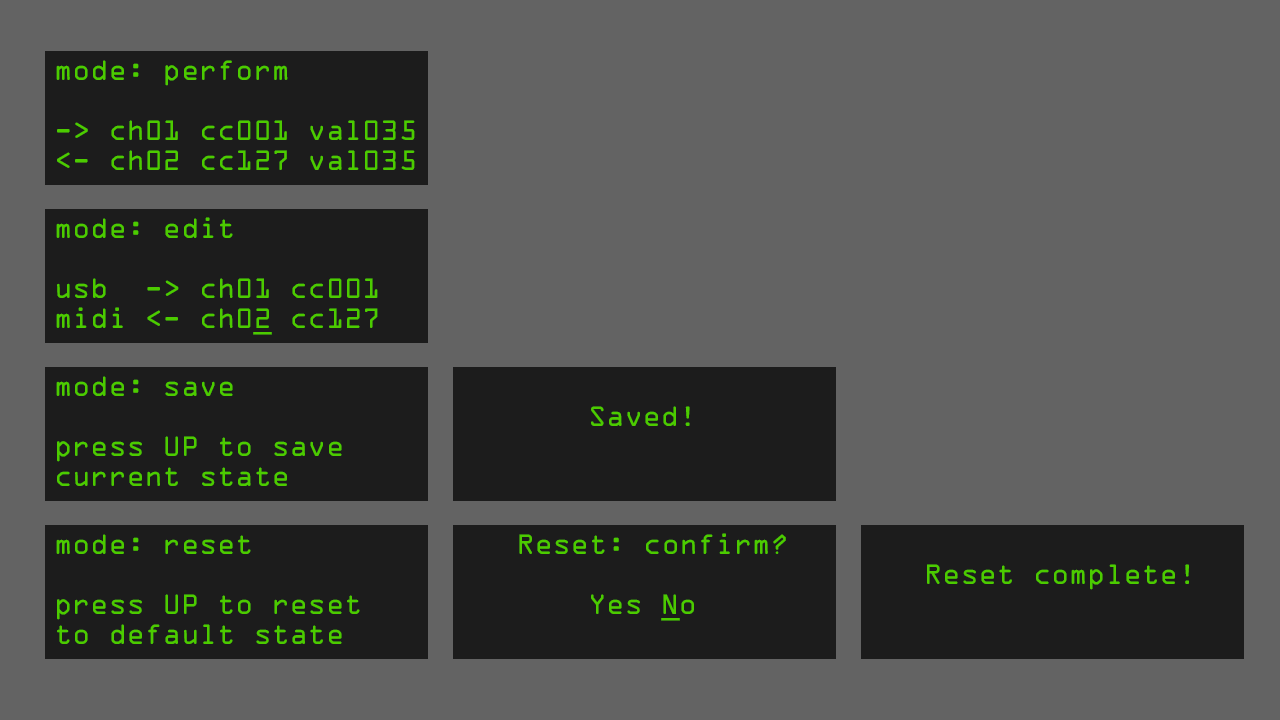
<style>
.page{position:relative;width:1280px;height:720px;background:#636363}
.page>*{position:absolute;margin:0}
.t1{font:30px/30px "OCR-A";color:#4ccb00}
.t2{font:30px "OCR-A";color:#4ccb00}
</style>
<div class="page">
<p class="t1" style="left:56px;top:60px;width:359px;height:110px">mode: perform<br><br>-&gt; ch01 cc001 val035<br>&lt;- ch02 cc127 val035</p>
<p class="t1" style="left:56px;top:217px;width:322px;height:111px">mode: edit<br><br>usb  -&gt; ch01 cc001<br>midi &lt;- ch02 cc127</p>
<p class="t2" style="left:253px;top:332px;width:19px;height:3px">_</p>
<p class="t1" style="left:56px;top:376px;width:286px;height:110px">mode: save<br><br>press UP to save<br>current state</p>
<p class="t2" style="left:591px;top:406px;width:99px;height:20px">Saved!</p>
<p class="t1" style="left:56px;top:534px;width:304px;height:110px">mode: reset<br><br>press UP to reset<br>to default state</p>
<p class="t1" style="left:519px;top:533px;width:267px;height:81px">Reset: confirm?<br><br>    Yes No</p>
<p class="t2" style="left:927px;top:564px;width:262px;height:26px">Reset complete!</p>
<p class="t2" style="left:661px;top:618px;width:19px;height:3px">_</p>
</div>
